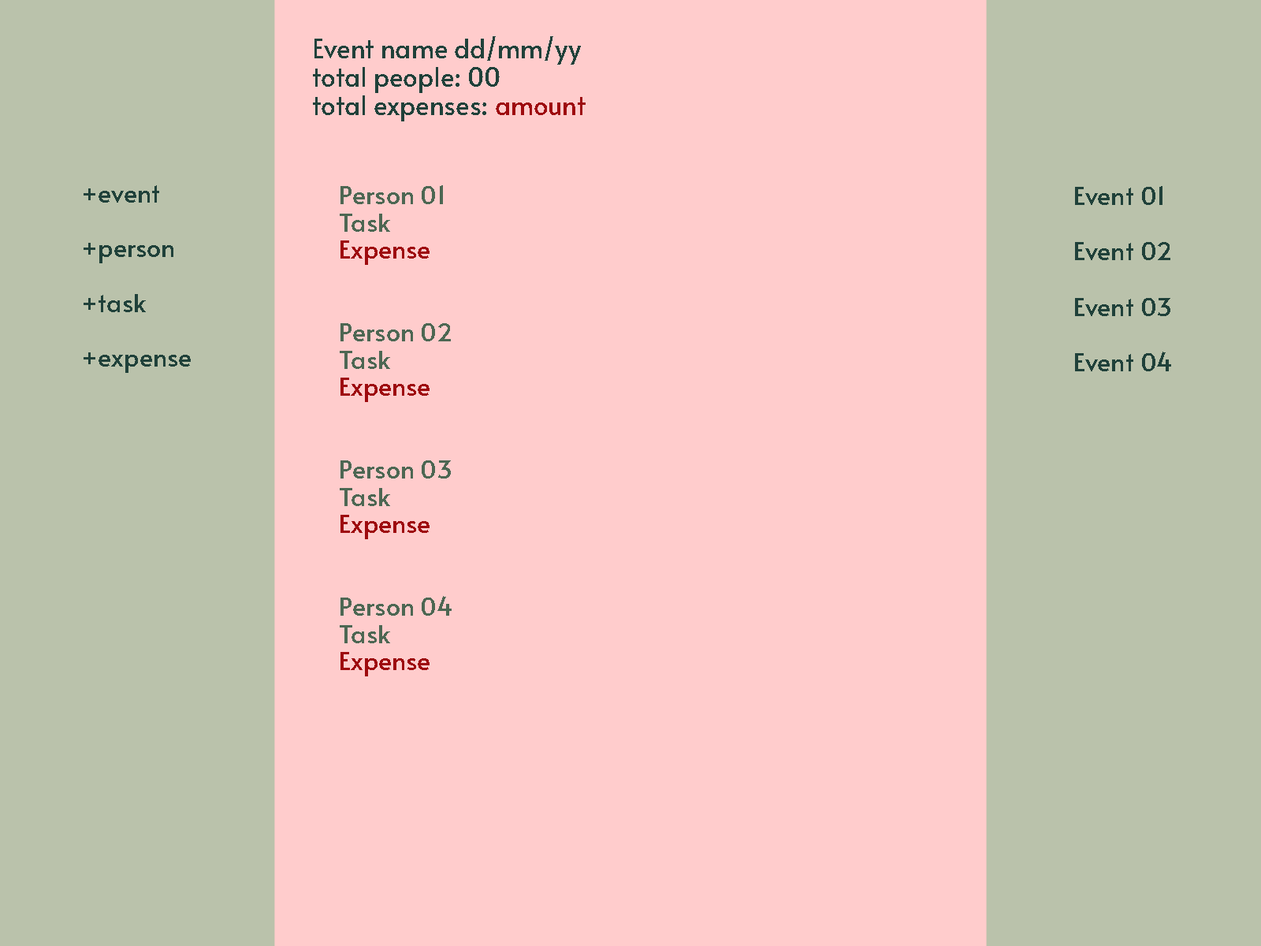
<style>
.page{position:relative;width:1261px;height:946px;background:#ffcccc}
.page>*{position:absolute;margin:0}
.t1{font:26px "Alata-Regular";color:#20413a}
.t2{font:26px "Alata-Regular";color:#9e0b0f}
.t3{font:25.1px "Alata-Regular";color:#20413a}
.t4{font:25.1px "Alata-Regular";color:#4d6753}
.t5{font:25.1px "Alata-Regular";color:#9e0b0f}
.t6{font:25.5px "Alata-Regular";color:#20413a}
</style>
<div class="page">
<p class="t1" style="left:313px;top:36px;width:273px;height:85px">Event name dd/mm/yy <br>total people: 00     <br>total expenses: <span class="t2">amount</span></p>
<p class="t3" style="left:84px;top:185px;width:107px;height:188px">+event<br><br>+person<br><br>+task<br><br>+expense</p>
<p class="t4" style="left:340px;top:185px;width:112px;height:491px">Person 01 <br>Task<br><span class="t5">Expense<br><br></span><br>Person 02<br>Task<br><span class="t5">Expense<br><br><br></span>Person 03<br>Task<br><span class="t5">Expense<br></span><br><br>Person 04<br>Task<br><span class="t5">Expense</span></p>
<p class="t6" style="left:1075px;top:186px;width:96px;height:185px">Event 01<br><br>Event 02<br><br>Event 03<br><br>Event 04</p>
</div>
